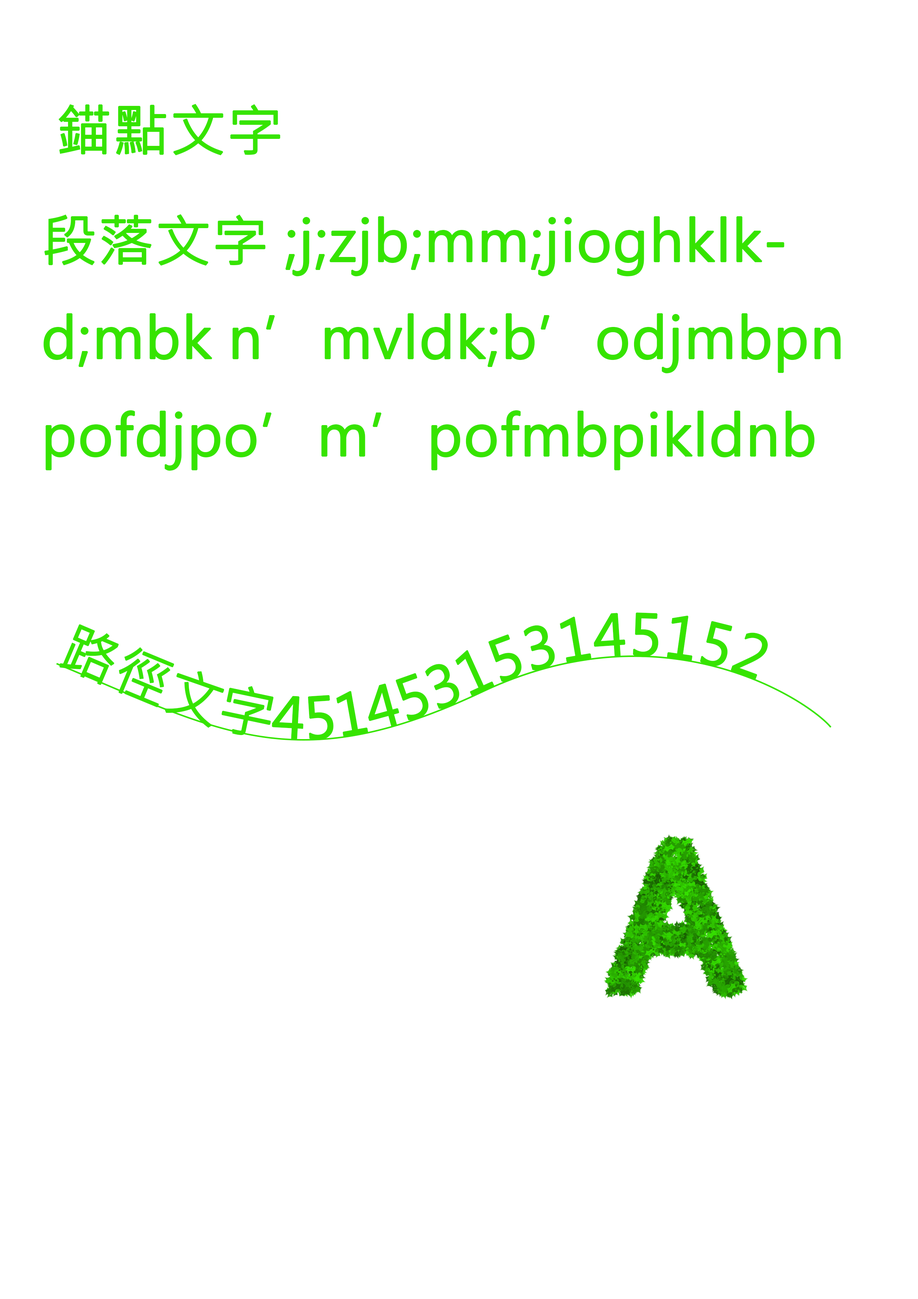
<style>
.page{position:relative;width:918px;height:1299px;background:#ffffff}
.page>*{position:absolute;margin:0}
.t1{font:55.5px "MicrosoftJhengHeiRegular";color:#36e400;font-weight:bold}
</style>
<div class="page">
<p class="t1" style="left:58px;top:104px;width:222px;height:51px">錨點文字</p>
<p class="t1" style="left:43px;top:214px;width:798px;height:257px">段落文字 ;j;zjb;mm;jioghklkd;mbk n’mvldk;b’odjmbpn pofdjpo’m’pofmbpikldnb</p>
<p class="t1" style="left:59px;top:612px;width:709px;height:128px">路徑文字451453153145152<br>513564513554564564564</p>
</div>
